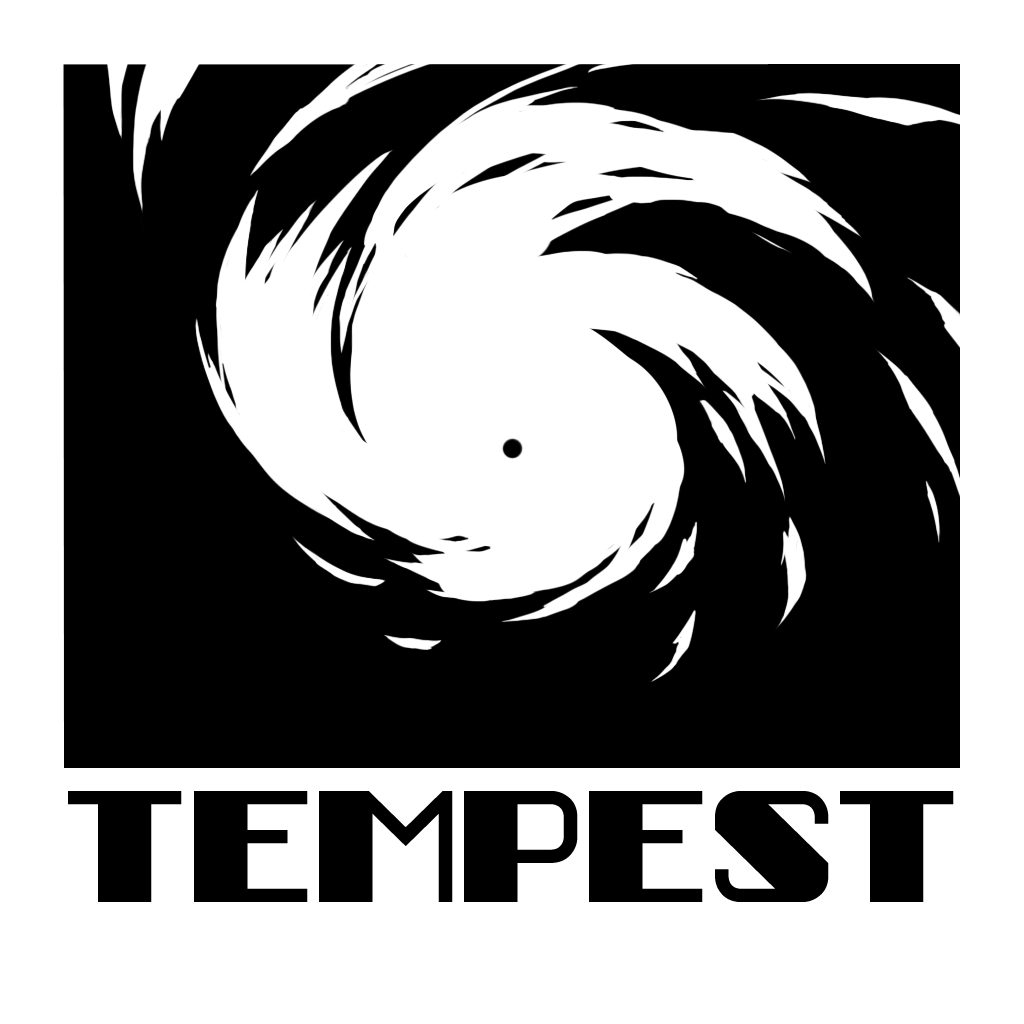
<style>
.page{position:relative;width:1024px;height:1024px;background:#ffffff}
.page>*{position:absolute;margin:0}
.t1{font:150px "PersuasionBRK";color:#000000}
</style>
<div class="page">
<p class="t1" style="left:68px;top:791px;width:886px;height:111px">TEMPEST</p>
</div>
